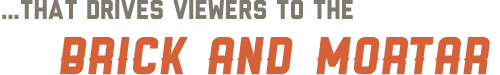
<style>
.page{position:relative;width:500px;height:75px;background:#ffffff}
.page>*{position:absolute;margin:0}
.t1{font:27.2px "Liberator";letter-spacing:-0.02em;color:#80796d}
.t2{font:50.8px "Ranger";letter-spacing:-0.02em;color:#d56139}
</style>
<div class="page">
<p class="t1" style="left:2px;top:0px;width:351px;height:19px">...THat DRIVES viewers TO THE</p>
<p class="t2" style="left:60px;top:37px;width:430px;height:38px">BRICK AND MORTAR</p>
</div>
